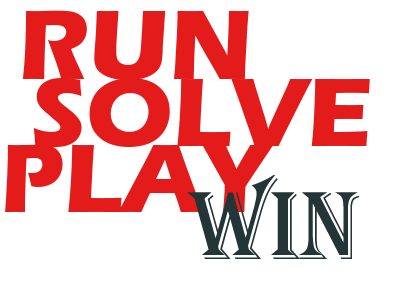
<style>
.page{position:relative;width:400px;height:300px;background:#ffffff}
.page>*{position:absolute;margin:0}
.t1{font:102px "ErasITC-Bold";color:#e41b1b}
.t2{font:100px "ErasITC-Bold";color:#e41b1b}
.t3{font:100px "Algerian";color:#243538}
</style>
<div class="page">
<p class="t1" style="left:22px;top:10px;width:227px;height:70px">RUN</p>
<p class="t2" style="left:33px;top:78px;width:337px;height:69px">SOLVE</p>
<p class="t2" style="left:5px;top:144px;width:269px;height:68px">PLAY</p>
<p class="t3" style="left:187px;top:174px;width:173px;height:85px">WIN</p>
</div>
